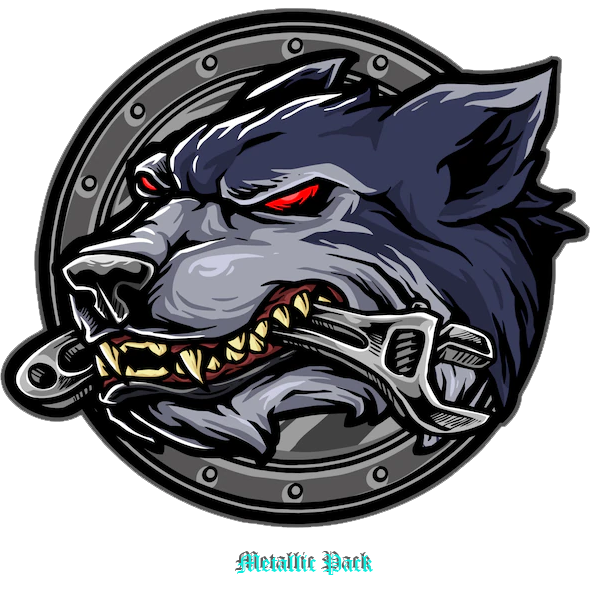
<style>
.page{position:relative;width:590px;height:600px;background:#ffffff}
.page>*{position:absolute;margin:0}
.t1{font:24px "OldEnglishTextMT"}
.t2{font:24px "OldEnglishTextMT";color:#11ebde}
</style>
<div class="page">
<p class="t1" style="left:235px;top:551px;width:136px;height:21px">Metallic Pack</p>
<p class="t2" style="left:237px;top:554px;width:136px;height:21px">Metallic Pack</p>
</div>
